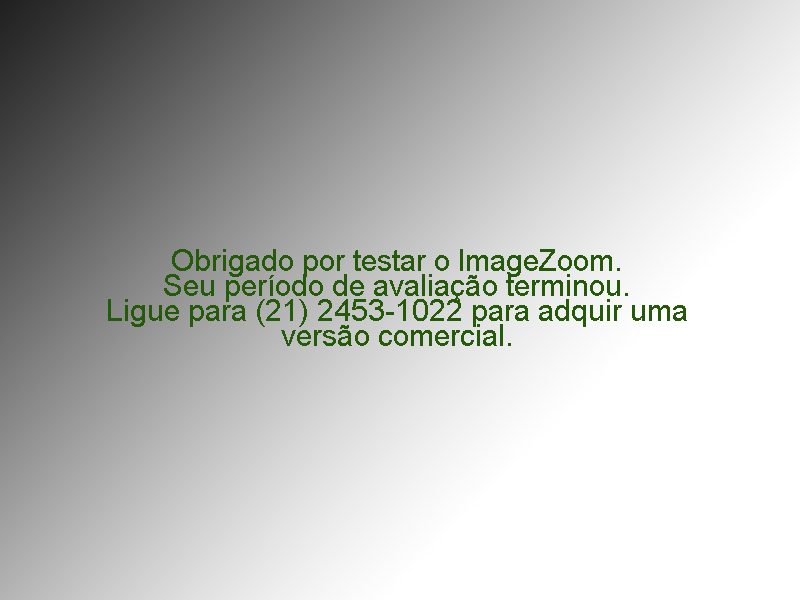
<style>
.page{position:relative;width:800px;height:600px}
.page>*{position:absolute;margin:0}
.t1{font:30px/25px "ArialMT";color:#255a0b}
</style>
<div class="page">
<p class="t1" style="left:108px;top:249px;width:579px;height:97px;text-align:center">Obrigado por testar o ImageZoom.<br>Seu período de avaliação terminou.<br>Ligue para (21) 2453-1022 para adquir uma versão comercial.</p>
</div>
